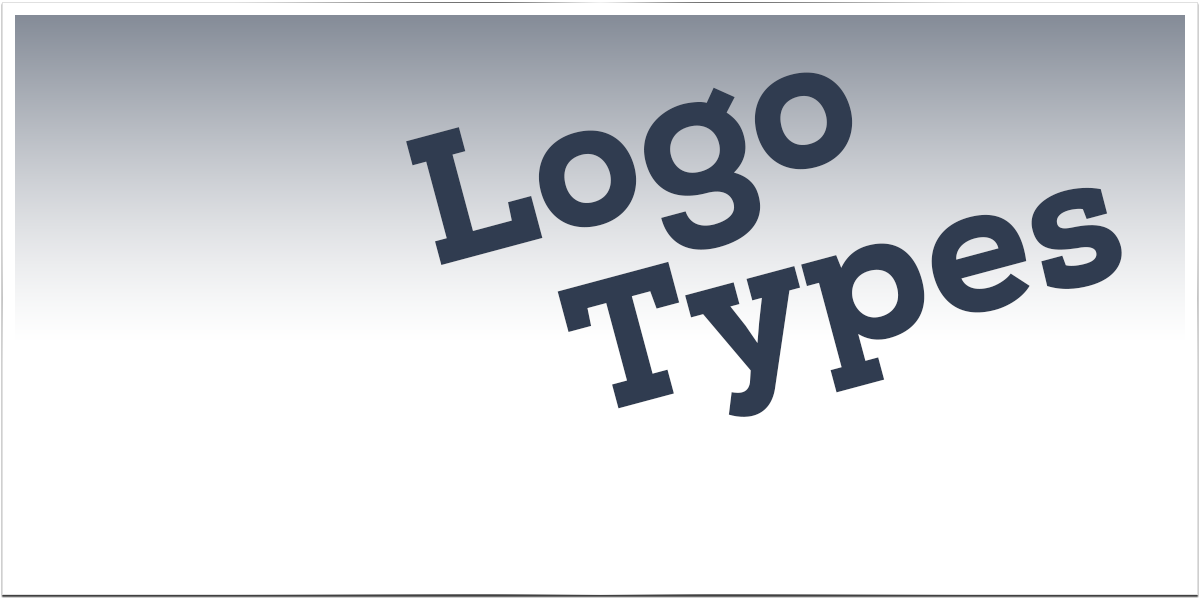
<style>
.page{position:relative;width:1200px;height:600px;background:#ffffff}
.page>*{position:absolute;margin:0}
.t1{font:183.6px "NexaSlabHeavy";color:#303c50}
</style>
<div class="page">
<p class="t1" style="left:406px;top:72px;width:447px;height:193px;rotate:-15deg">Logo</p>
<p class="t1" style="left:557px;top:187px;width:565px;height:230px;rotate:-15deg">Types</p>
</div>
